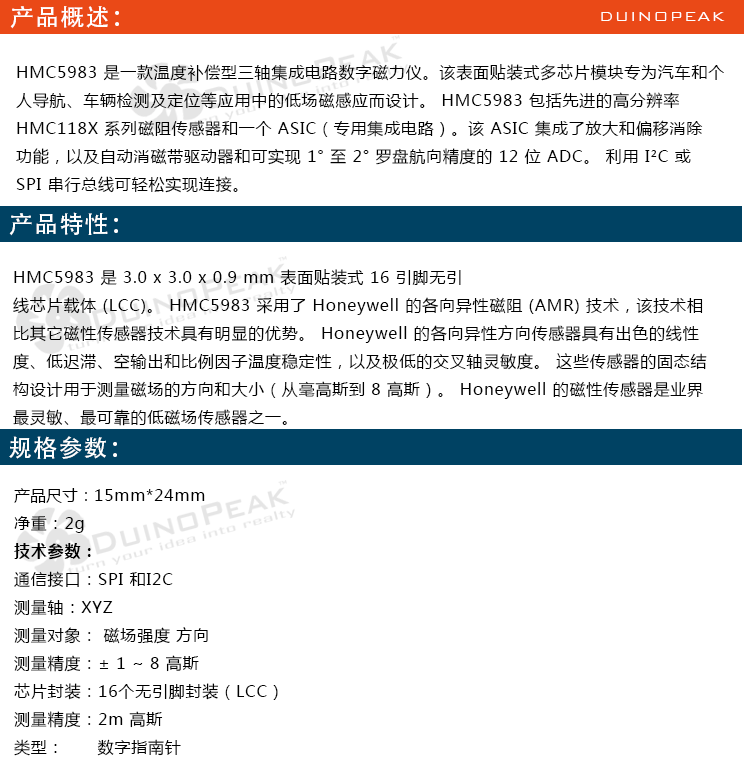
<style>
.page{position:relative;width:744px;height:776px;background:#ffffff}
.page>*{position:absolute;margin:0}
.t1{font:24px "AdobeHeitiStd-Regular";letter-spacing:0.05em;color:#ffffff}
.t2{font:18px "BankGothicBT-Light";letter-spacing:0.05em;color:#ffffff}
.t3{font:16px "MicrosoftYaHei";letter-spacing:0.05em;color:#000000}
.t4{font:16px "MicrosoftYaHei";color:#000000}
.t5{font:16px "MicrosoftYaHei-Bold";letter-spacing:0.05em;color:#000000}
</style>
<div class="page">
<p class="t1" style="left:10px;top:6px;width:109px;height:23px">产品概述：</p>
<p class="t2" style="left:601px;top:12px;width:124px;height:9px">DUINOPEAK</p>
<p class="t3" style="left:16px;top:64px;width:708px;height:129px">HMC5983 是一款温度补偿型三轴集成电路数字磁力仪。该表面贴装式多芯片模块专为汽车和个<br>人导航、车辆检测及定位等应用中的低场磁感应而设计。 HMC5983 包括先进的高分辨率 <br>HMC118X 系列磁阻传感器和一个 ASIC（专用集成电路）。该 ASIC 集成了放大和偏移消除<br>功能，以及自动消磁带驱动器和可实现 1° 至 2° 罗盘航向精度的 12 位 ADC。 利用 I²C 或 <br>SPI 串行总线可轻松实现连接。</p>
<p class="t1" style="left:9px;top:212px;width:109px;height:24px">产品特性：</p>
<p class="t3" style="left:13px;top:269px;width:694px;height:157px">HMC5983 是 3.0 x 3.0 x 0.9 mm 表面贴装式 16 引脚无引<br>线芯片载体 (LCC)。 HMC5983 采用了 Honeywell 的各向异性磁阻 (AMR) 技术，该技术相<br>比其它磁性传感器技术具有明显的优势。 Honeywell 的各向异性方向传感器具有出色的线性<br>度、低迟滞、空输出和比例因子温度稳定性，以及极低的交叉轴灵敏度。 这些传感器的固态结<br>构设计用于测量磁场的方向和大小（从毫高斯到 8 高斯）。 Honeywell 的磁性传感器是业界<br>最灵敏、最可靠的低磁场传感器之一。</p>
<p class="t1" style="left:9px;top:436px;width:108px;height:23px">规格参数：</p>
<p class="t3" style="left:14px;top:488px;width:264px;height:268px"><span class="t4">产品尺寸：</span>15mm*24mm<br>净重：2g<br><span class="t5">技术参数：</span><br>通信接口：SPI 和I2C<br>测量轴：XYZ<br>测量对象： 磁场强度 方向<br>测量精度：± 1 ~ 8 高斯<br>芯片封装：16个无引脚封装（LCC）<br>测量精度：2m 高斯<br>类型：      数字指南针</p>
</div>
